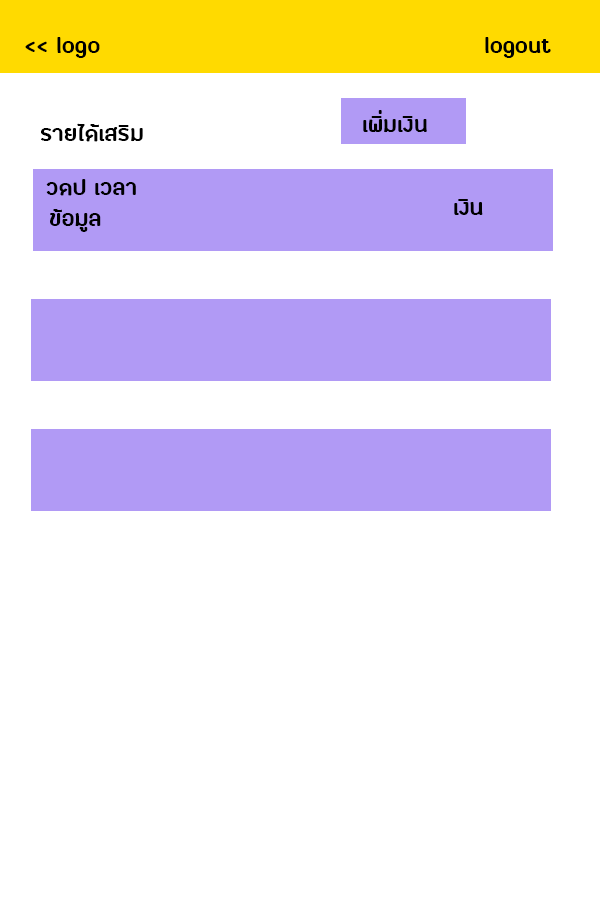
<style>
.page{position:relative;width:600px;height:900px;background:#ffffff}
.page>*{position:absolute;margin:0}
.t1{font:30px "FCLamoonBold";color:#000000}
</style>
<div class="page">
<p class="t1" style="left:25px;top:37px;width:75px;height:21px">&lt;&lt; logo</p>
<p class="t1" style="left:485px;top:37px;width:66px;height:21px">logout</p>
<p class="t1" style="left:363px;top:110px;width:64px;height:23px">เพิ่มเงิน</p>
<p class="t1" style="left:41px;top:123px;width:102px;height:19px">รายได้เสริม</p>
<p class="t1" style="left:46px;top:179px;width:90px;height:17px">วดป เวลา</p>
<p class="t1" style="left:50px;top:209px;width:51px;height:23px">ข้อมูล</p>
<p class="t1" style="left:454px;top:199px;width:29px;height:16px">เงิน</p>
</div>
